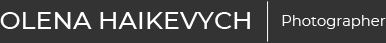
<style>
.page{position:relative;width:386px;height:43px;background:#333333}
.page>*{position:absolute;margin:0}
.t1{font:24px "Montserrat-Medium";color:#ffffff;scale:1.05 1}
.t2{font:14px "Montserrat-Regular";color:#ffffff;scale:1.05 1}
</style>
<div class="page">
<p class="t1" style="left:0px;top:12px;width:250px;height:17px">OLENA HAIKEVYCH</p>
<p class="t2" style="left:282px;top:15px;width:104px;height:14px">Photographer</p>
</div>
